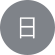
<style>
.page{position:relative;width:55px;height:55px;background:#7f8389}
.page>*{position:absolute;margin:0}
.t1{font:24px "PingFang-SC-Regular";color:#ffffff}
</style>
<div class="page">
<p class="t1" style="left:19px;top:17px;width:16px;height:22px">日</p>
</div>
